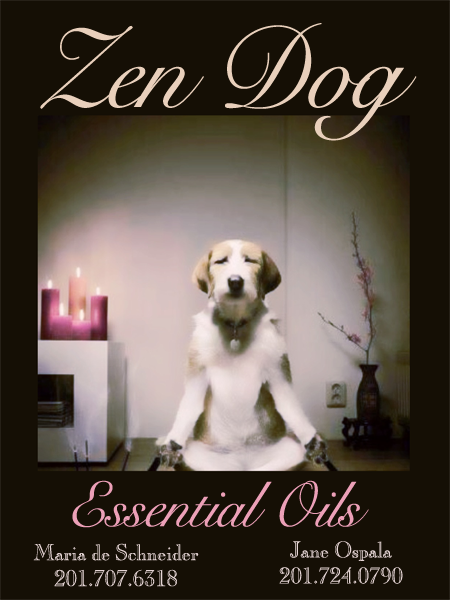
<style>
.page{position:relative;width:450px;height:600px;background:#150f05}
.page>*{position:absolute;margin:0}
.t1{font:113.6px "SnellRoundhand-Script";letter-spacing:-0.025em;color:#e9d0bc}
.t2{font:63.6px "SnellRoundhand-Script";letter-spacing:-0.025em;color:#eca0b8}
.t3{font:22.7px/8.6px "CaslonOpenFace";letter-spacing:-0.025em;color:#e6d6d6}
</style>
<div class="page">
<p class="t1" style="left:40px;top:23px;width:377px;height:118px">Zen Dog</p>
<p class="t2" style="left:72px;top:480px;width:297px;height:48px">Essential Oils</p>
<p class="t3" style="left:33px;top:543px;width:166px;height:44px;text-align:center">Maria de Schneider<br><br><br>201.707.6318</p>
<p class="t3" style="left:279px;top:541px;width:124px;height:43px;text-align:center">Jane Ospala<br><br><br>201.724.0790</p>
</div>
